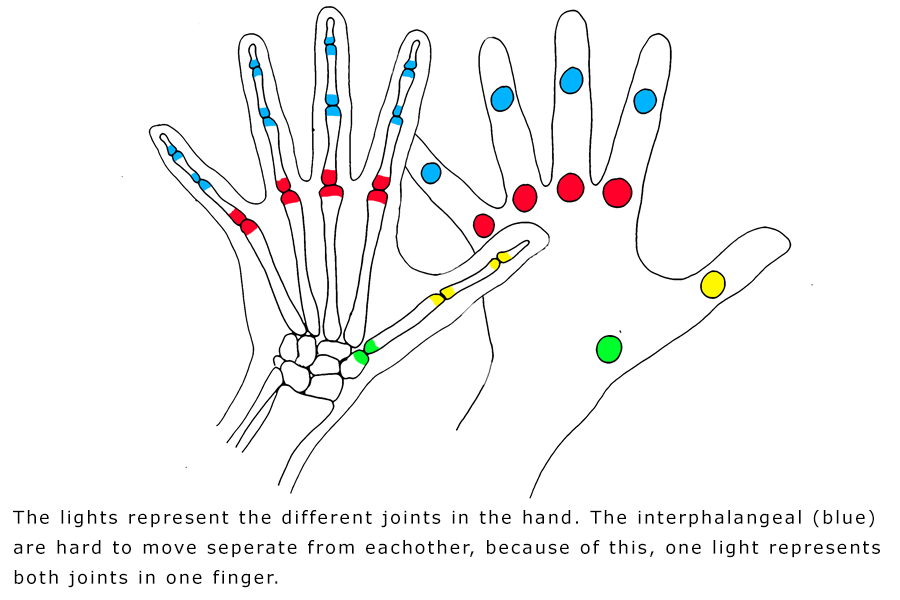
<style>
.page{position:relative;width:900px;height:600px;background:#ffffff}
.page>*{position:absolute;margin:0}
.t1{font:18px/30px "Verdana";letter-spacing:0.1em;color:#000000}
</style>
<div class="page">
<p class="t1" style="left:13px;top:510px;width:867px;height:78px">The lights represent the different joints in the hand. The interphalangeal (blue) are hard to move seperate from eachother, because of this, one light represents both joints in one finger.</p>
</div>
